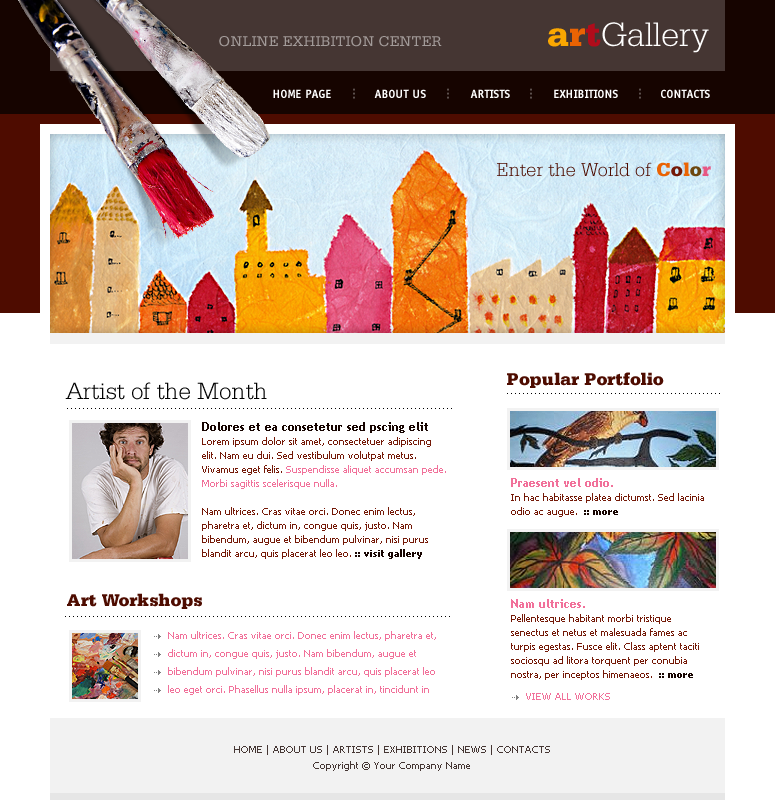
<style>
.page{position:relative;width:775px;height:800px;background:#ffffff}
.page>*{position:absolute;margin:0}
.t1{font:36px "SerifaStd-Light";color:#ffffff}
.t2{font:36px "SerifaStd-Black";color:#faa701}
.t3{font:36px "SerifaStd-Black";color:#ea6303}
.t4{font:36px "SerifaStd-Black";color:#b10c1b}
.t5{font:15px "SerifaStd-Roman";color:#a29b99;text-transform:uppercase}
.t6{font:12px "OffensiveBoldBold";color:#ffffff}
.t7{font:12px "OffensiveBoldBold";color:#5c504d}
.t8{font:19.9px "SerifaStd-Light";color:#4e0c00}
.t9{font:19.9px "SerifaStd-Black";color:#ea6303}
.t10{font:19.9px "SerifaStd-Black";color:#741907}
.t11{font:19.9px "SerifaStd-Black";color:#6d470f}
.t12{font:19.9px "SerifaStd-Black";color:#e75884}
.t13{font:18px "SerifaStd-Black";color:#4e0c00}
.t14{font:24.7px "SerifaStd-Light";color:#000000}
.t15{font:10px "TrebuchetMS-Bold";color:#000000}
.t16{font:10px/14px "Tahoma";color:#741907}
.t17{font:12px/12px "TrebuchetMS-Bold";color:#160400}
.t18{font:10px/14px "Tahoma";color:#f1719a}
.t19{font:10px/14px "Tahoma-Bold";color:#160400}
.t20{font:12px/12px "TrebuchetMS-Bold";color:#f1719a}
.t21{font:10px/18px "Tahoma";color:#f1719a}
.t22{font:10px "Tahoma";color:#f1719a}
.t23{font:10px/16px "Tahoma";color:#453633}
</style>
<div class="page">
<p class="t1" style="left:548px;top:22px;width:161px;height:31px"><span class="t2">a</span><span class="t3">r</span><span class="t4">t</span>Gallery</p>
<p class="t5" style="left:219px;top:36px;width:223px;height:11px">online exhibition center</p>
<p class="t6" style="left:273px;top:89px;width:58px;height:9px">HOME PAGE</p>
<p class="t7" style="left:353px;top:88px;width:2px;height:11px;rotate:90deg">...</p>
<p class="t6" style="left:374px;top:89px;width:52px;height:9px">ABOUT US</p>
<p class="t7" style="left:447px;top:88px;width:2px;height:11px;rotate:90deg">...</p>
<p class="t6" style="left:470px;top:89px;width:40px;height:9px">ARTISTS</p>
<p class="t7" style="left:530px;top:88px;width:2px;height:11px;rotate:90deg">...</p>
<p class="t6" style="left:554px;top:89px;width:64px;height:9px">EXHIBITIONS</p>
<p class="t7" style="left:639px;top:88px;width:2px;height:11px;rotate:90deg">...</p>
<p class="t6" style="left:661px;top:89px;width:49px;height:9px">CONTACTS</p>
<p class="t8" style="left:497px;top:162px;width:214px;height:15px">Enter the World of <span class="t9">C</span><span class="t10">o</span><span class="t9">l</span><span class="t11">o</span><span class="t12">r</span></p>
<p class="t13" style="left:507px;top:372px;width:157px;height:16px">Popular Portfolio</p>
<p class="t14" style="left:65px;top:382px;width:202px;height:18px">Artist of the Month</p>
<p class="t15" style="left:507px;top:393px;width:213px;height:1px">......................................................</p>
<p class="t15" style="left:67px;top:408px;width:385px;height:1px">.................................................................................................</p>
<p class="t16" style="left:202px;top:422px;width:244px;height:137px"><span class="t17">Dolores et ea consetetur sed pscing elit </span><br>Lorem ipsum dolor sit amet, consectetuer adipiscing elit. Nam eu dui. Sed vestibulum volutpat metus. Vivamus eget felis. <span class="t18">Suspendisse aliquet accumsan pede. Morbi sagittis scelerisque nulla.<br></span><br>Nam ultrices. Cras vitae orci. Donec enim lectus, pharetra et, dictum in, congue quis, justo. Nam bibendum, augue et bibendum pulvinar, nisi purus blandit arcu, quis placerat leo leo. <span class="t19">:: visit gallery</span></p>
<p class="t16" style="left:511px;top:478px;width:193px;height:39px"><span class="t20">Praesent vel odio. <br></span>In hac habitasse platea dictumst. Sed lacinia odio ac augue.  <span class="t19">:: more</span></p>
<p class="t13" style="left:67px;top:593px;width:135px;height:16px">Art Workshops</p>
<p class="t16" style="left:511px;top:599px;width:188px;height:81px"><span class="t20">Nam ultrices. <br></span>Pellentesque habitant morbi tristique senectus et netus et malesuada fames ac turpis egestas. Fusce elit. Class aptent taciti sociosqu ad litora torquent per conubia nostra, per inceptos himenaeos.  <span class="t19">:: more</span></p>
<p class="t15" style="left:65px;top:616px;width:385px;height:1px">.................................................................................................</p>
<p class="t21" style="left:168px;top:631px;width:268px;height:64px">Nam ultrices. Cras vitae orci. Donec enim lectus, pharetra et, dictum in, congue quis, justo. Nam bibendum, augue et bibendum pulvinar, nisi purus blandit arcu, quis placerat leo leo eget orci. Phasellus nulla ipsum, placerat in, tincidunt in</p>
<p class="t22" style="left:526px;top:693px;width:84px;height:7px">VIEW ALL WORKS</p>
<p class="t23" style="left:234px;top:745px;width:316px;height:26px;text-align:center">HOME | ABOUT US | ARTISTS | EXHIBITIONS | NEWS | CONTACTS<br>Copyright © Your Company Name</p>
</div>
